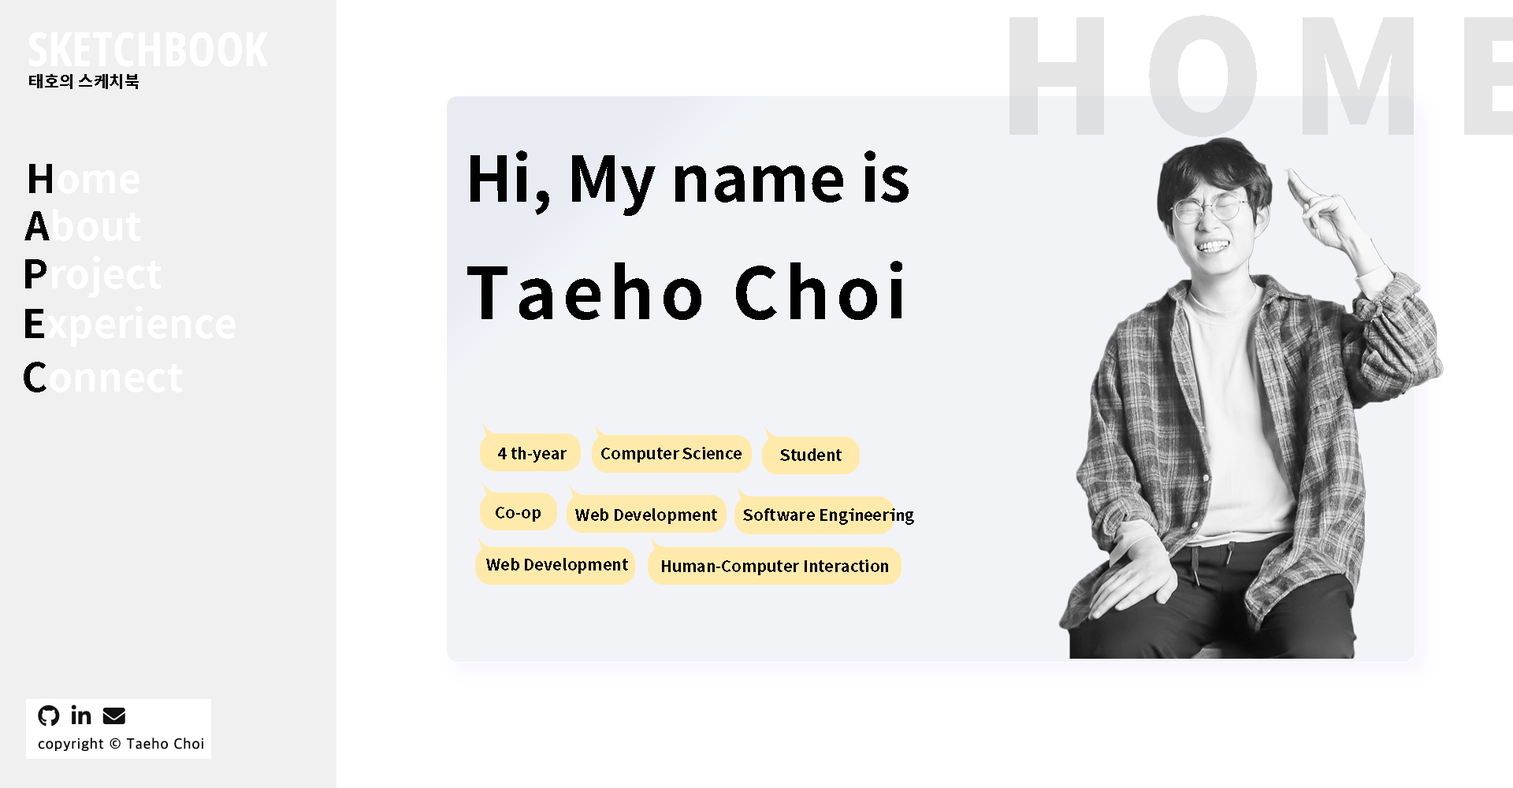
<style>
.page{position:relative;width:1513px;height:788px;background:#ffffff}
.page>*{position:absolute;margin:0}
.t1{font:47.3px "NotoSans-ExtraCondensedBold";color:#ffffff}
.t2{font:16.6px "NotoSansCJKkr-Bold";color:#000000}
.t3{font:63px "NotoSansCJKkr-Bold";color:#000000}
.t4{font:70.9px "NotoSansCJKkr-Bold";letter-spacing:0.08em;color:#000000}
.t5{font:39.4px "NotoSansCJKkr-Bold";color:#ffffff}
.t6{font:39.4px "NotoSansCJKkr-Bold";color:#050505}
.t7{font:15.8px "NotoSansCJKkr-Bold";color:#000000}
</style>
<div class="page">
<p class="t1" style="left:29px;top:32px;width:239px;height:35px">SKETCHBOOK</p>
<p class="t2" style="left:29px;top:74px;width:110px;height:15px">태호의 스케치북</p>
<p class="t3" style="left:467px;top:151px;width:442px;height:169px">Hi, My name is   <br><span class="t4">Taeho Choi</span></p>
<p class="t5" style="left:29px;top:164px;width:110px;height:30px"><span class="t6">H</span>ome</p>
<p class="t7" style="left:498px;top:447px;width:69px;height:16px">4 th-year</p>
<p class="t7" style="left:601px;top:447px;width:141px;height:16px">Computer Science</p>
<p class="t7" style="left:780px;top:448px;width:62px;height:13px">Student</p>
<p class="t7" style="left:496px;top:507px;width:45px;height:15px">Co-op</p>
<p class="t7" style="left:575px;top:508px;width:142px;height:16px">Web Development</p>
<p class="t7" style="left:743px;top:508px;width:171px;height:17px">Software Engineering</p>
<p class="t7" style="left:486px;top:558px;width:142px;height:16px">Web Development</p>
<p class="t7" style="left:662px;top:560px;width:226px;height:15px">Human-Computer Interaction</p>
</div>
